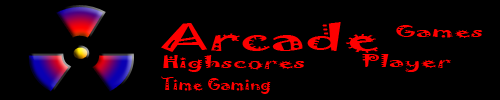
<style>
.page{position:relative;width:500px;height:100px;background:#000000}
.page>*{position:absolute;margin:0}
.t1{font:31.7px "Jokerman-Regular";color:#fe0000;scale:1.89 1}
.t2{font:14.7px "Jokerman-Regular";color:#ff0000;scale:1.91 1}
.t3{font:14.7px "Jokerman-Regular";color:#ff0000;scale:1.87 1}
.t4{font:14.7px "Jokerman-Regular";color:#ff0000;scale:1.83 1}
.t5{font:14.7px "Jokerman-Regular";color:#ff0000;scale:1.2 1}
</style>
<div class="page">
<p class="t1" style="left:161px;top:22px;width:217px;height:31px">Arcade</p>
<p class="t2" style="left:396px;top:25px;width:87px;height:13px">Games</p>
<p class="t3" style="left:362px;top:54px;width:89px;height:18px">Player</p>
<p class="t4" style="left:163px;top:55px;width:142px;height:17px">Highscores</p>
<p class="t5" style="left:161px;top:76px;width:110px;height:18px">Time Gaming</p>
</div>
